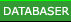
<style>
.page{position:relative;width:71px;height:22px;background:#339933}
.page>*{position:absolute;margin:0}
.t1{font:11px "Verdana";color:#ffffff}
</style>
<div class="page">
<p class="t1" style="left:4px;top:6px;width:66px;height:10px">DATABASER</p>
</div>
